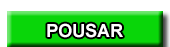
<style>
.page{position:relative;width:170px;height:47px;background:#ffffff}
.page>*{position:absolute;margin:0}
.t1{font:18px "Arial-BoldMT";color:#ffffff}
</style>
<div class="page">
<p class="t1" style="left:47px;top:23px;width:76px;height:15px">POUSAR</p>
</div>
